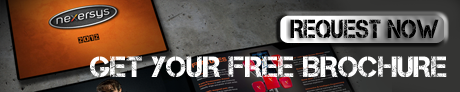
<style>
.page{position:relative;width:460px;height:92px}
.page>*{position:absolute;margin:0}
.t1{font:25.9px "Captureit";color:#000000;text-transform:uppercase;scale:0.86 1}
.t2{font:29.3px "Captureit";color:#ffffff;text-transform:uppercase}
</style>
<div class="page">
<p class="t1" style="left:290px;top:19px;width:149px;height:20px">request now</p>
<p class="t2" style="left:90px;top:56px;width:357px;height:22px">Get your free Brochure</p>
</div>
